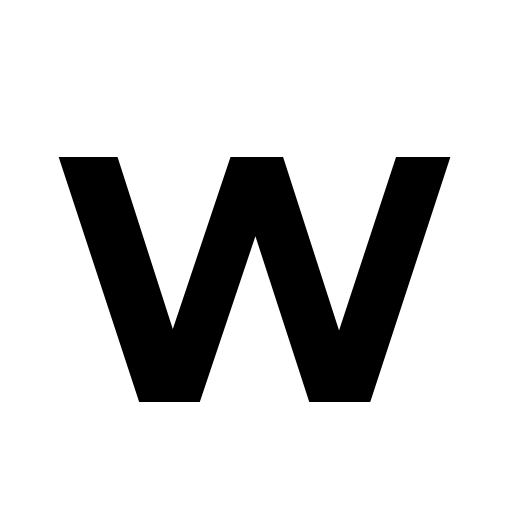
<style>
.page{position:relative;width:512px;height:512px;background:#ffffff}
.page>*{position:absolute;margin:0}
.t1{font:350px "Montserrat-Bold";color:#000000}
</style>
<div class="page">
<p class="t1" style="left:58px;top:157px;width:393px;height:245px">W</p>
</div>
